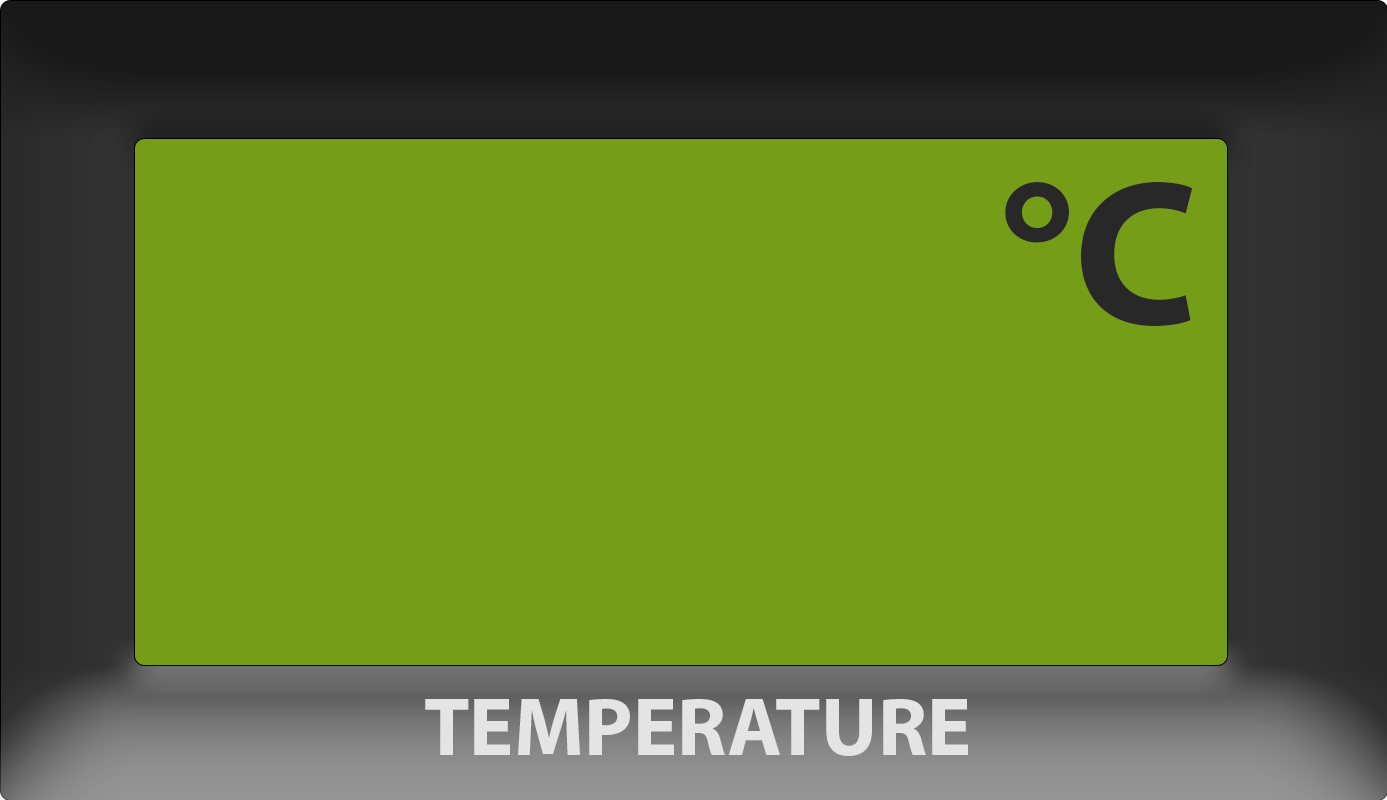
<style>
.page{position:relative;width:1387px;height:800px;background:#769d18}
.page>*{position:absolute;margin:0}
.t1{font:208.3px "MyriadPro-Bold";color:#282828}
.t2{font:83.3px "MyriadPro-Bold";color:#e4e4e4}
</style>
<div class="page">
<p class="t1" style="left:1005px;top:182px;width:188px;height:144px">°C</p>
<p class="t2" style="left:425px;top:699px;width:543px;height:57px">TEMPERATURE</p>
</div>
